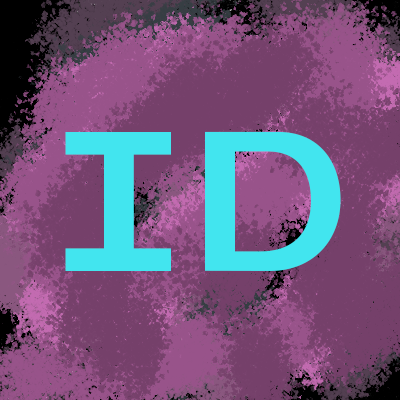
<style>
.page{position:relative;width:400px;height:400px}
.page>*{position:absolute;margin:0}
.t1{font:198px "NeueMetanaNextFreePersonal-Sm";color:#42e5ef}
</style>
<div class="page">
<p class="t1" style="left:65px;top:131px;width:276px;height:140px">ID</p>
</div>
